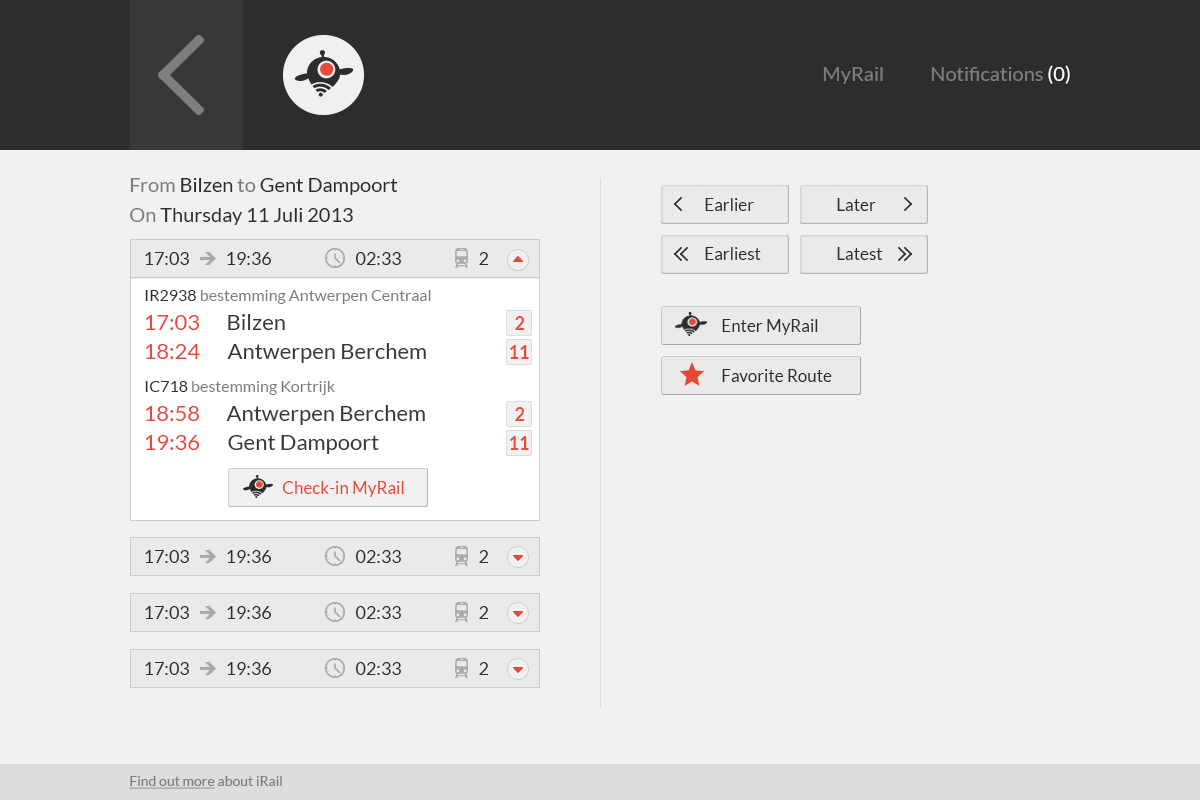
<style>
.page{position:relative;width:1200px;height:800px;background:#f1f1f1}
.page>*{position:absolute;margin:0}
.t1{font:20px "Lato-Regular";color:#7e7e7e}
.t2{font:20px "Lato-Regular";color:#ffffff}
.t3{font:20px/30px "Lato-Regular";color:#2d2d2d}
.t4{font:20px/30px "Lato-Regular";color:#7e7e7e}
.t5{font:17px "Lato-Regular";color:#2d2d2d}
.t6{font:18px "Lato-Regular";color:#2d2d2d}
.t7{font:16px "Lato-Regular";color:#7e7e7e}
.t8{font:16px "Lato-Regular";color:#2d2d2d;font-variant:small-caps}
.t9{font:22px "Lato-Regular";color:#e74b3b}
.t10{font:22px "Lato-Regular";color:#383838}
.t11{font:18px "Lato-Bold";color:#e74b3b}
.t12{font:17px "Lato-Regular";color:#e74a3a}
.t13{font:14px "Lato-Regular";color:#7e7e7e;text-decoration:underline}
.t14{font:14px "Lato-Regular";color:#7e7e7e}
</style>
<div class="page">
<p class="t1" style="left:931px;top:65px;width:139px;height:19px">Notifications <span class="t2">(0)</span></p>
<p class="t1" style="left:823px;top:67px;width:60px;height:17px">MyRail</p>
<p class="t3" style="left:130px;top:178px;width:268px;height:47px"><span class="t4">From </span>Bilzen <span class="t4">to </span>Gent Dampoort <br><span class="t4">On </span>Thursday 11 Juli 2013</p>
<p class="t5" style="left:705px;top:198px;width:49px;height:13px">Earlier</p>
<p class="t5" style="left:837px;top:198px;width:39px;height:13px">Later</p>
<p class="t6" style="left:145px;top:252px;width:44px;height:13px">17:03</p>
<p class="t6" style="left:227px;top:252px;width:44px;height:13px">19:36</p>
<p class="t6" style="left:355px;top:252px;width:46px;height:13px">02:33</p>
<p class="t6" style="left:479px;top:252px;width:10px;height:13px">2</p>
<p class="t5" style="left:705px;top:247px;width:56px;height:13px">Earliest</p>
<p class="t5" style="left:837px;top:247px;width:46px;height:13px">Latest</p>
<p class="t7" style="left:145px;top:290px;width:286px;height:14px"><span class="t8">IR2938 </span>bestemming Antwerpen Centraal</p>
<p class="t9" style="left:145px;top:315px;width:55px;height:15px">17:03</p>
<p class="t10" style="left:228px;top:314px;width:57px;height:16px">Bilzen</p>
<p class="t11" style="left:515px;top:316px;width:10px;height:14px">2</p>
<p class="t5" style="left:722px;top:319px;width:96px;height:16px">Enter MyRail</p>
<p class="t9" style="left:145px;top:344px;width:55px;height:15px">18:24</p>
<p class="t10" style="left:227px;top:343px;width:199px;height:20px">Antwerpen Berchem</p>
<p class="t11" style="left:510px;top:345px;width:19px;height:14px">11</p>
<p class="t5" style="left:722px;top:369px;width:110px;height:13px">Favorite Route</p>
<p class="t7" style="left:145px;top:381px;width:190px;height:14px"><span class="t8">IC718 </span>bestemming Kortrijk</p>
<p class="t9" style="left:145px;top:406px;width:54px;height:15px">18:58</p>
<p class="t10" style="left:226px;top:405px;width:199px;height:20px">Antwerpen Berchem</p>
<p class="t11" style="left:515px;top:407px;width:10px;height:14px">2</p>
<p class="t9" style="left:145px;top:435px;width:55px;height:15px">19:36</p>
<p class="t10" style="left:228px;top:435px;width:151px;height:19px">Gent Dampoort</p>
<p class="t11" style="left:510px;top:436px;width:19px;height:14px">11</p>
<p class="t12" style="left:282px;top:481px;width:122px;height:16px">Check-in MyRail</p>
<p class="t6" style="left:145px;top:550px;width:44px;height:13px">17:03</p>
<p class="t6" style="left:227px;top:550px;width:44px;height:13px">19:36</p>
<p class="t6" style="left:355px;top:550px;width:46px;height:13px">02:33</p>
<p class="t6" style="left:479px;top:550px;width:10px;height:13px">2</p>
<p class="t6" style="left:145px;top:606px;width:44px;height:13px">17:03</p>
<p class="t6" style="left:227px;top:606px;width:44px;height:13px">19:36</p>
<p class="t6" style="left:355px;top:606px;width:46px;height:13px">02:33</p>
<p class="t6" style="left:479px;top:606px;width:10px;height:13px">2</p>
<p class="t6" style="left:145px;top:662px;width:44px;height:13px">17:03</p>
<p class="t6" style="left:227px;top:662px;width:44px;height:13px">19:36</p>
<p class="t6" style="left:355px;top:662px;width:46px;height:13px">02:33</p>
<p class="t6" style="left:479px;top:662px;width:10px;height:13px">2</p>
<p class="t13" style="left:129px;top:776px;width:153px;height:13px">Find out more<span class="t14"> about iRail</span></p>
</div>
